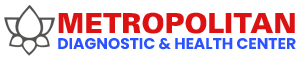
<style>
.page{position:relative;width:300px;height:60px;background:#ffffff}
.page>*{position:absolute;margin:0}
.t1{font:27.6px "Univers-Black";color:#dc1111;text-transform:uppercase}
.t2{font:15.5px "Poppins-Bold";color:#2a52ff;text-transform:uppercase}
</style>
<div class="page">
<p class="t1" style="left:58px;top:12px;width:237px;height:22px">Metropolitan</p>
<p class="t2" style="left:58px;top:38px;width:238px;height:12px">DIAGNOSTIC &amp; HEALTH CENTER</p>
</div>
